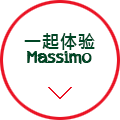
<style>
.page{position:relative;width:120px;height:120px;background:#ffffff}
.page>*{position:absolute;margin:0}
.t1{font:18px/15px "appleberry";color:#004625}
.t2{font:18px/15px "MicrosoftJhengHeiBold";color:#004625}
</style>
<div class="page">
<p class="t1" style="left:24px;top:33px;width:71px;height:31px;text-align:center"><span class="t2">一起体验<br></span>Massimo</p>
</div>
